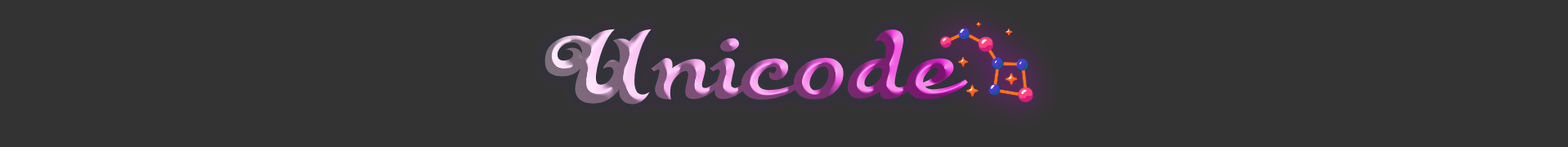
<style>
.page{position:relative;width:1568px;height:147px;background:#333333}
.page>*{position:absolute;margin:0}
.t1{font:108.8px "BlackRose";scale:1.2 1}
</style>
<div class="page">
<p class="t1" style="left:544px;top:29px;width:424px;height:76px">Unicode</p>
</div>
